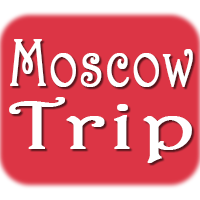
<style>
.page{position:relative;width:200px;height:200px;background:#dc3545}
.page>*{position:absolute;margin:0}
.t1{font:67.2px/48px "Harrington";letter-spacing:0.03em;color:#ffffff;font-weight:bold;scale:0.71 1}
.t2{font:67.2px/63px "Harrington";letter-spacing:0.03em;color:#ffffff;font-weight:bold;scale:1.43 1}
</style>
<div class="page">
<p class="t1" style="left:9px;top:39px;width:184px;height:124px;text-align:center">Moscow<br><span class="t2">Trip</span></p>
</div>
